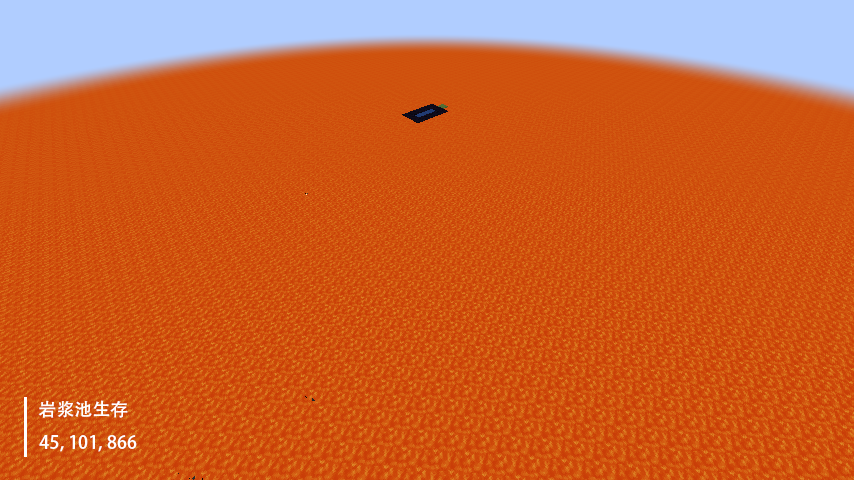
<style>
.page{position:relative;width:854px;height:480px}
.page>*{position:absolute;margin:0}
.t1{font:18px "AdobeHeitiStd-Regular";color:#ffffff}
</style>
<div class="page">
<p class="t1" style="left:38px;top:400px;width:90px;height:18px">岩浆池生存</p>
<p class="t1" style="left:39px;top:435px;width:98px;height:17px">45, 101, 866</p>
</div>
